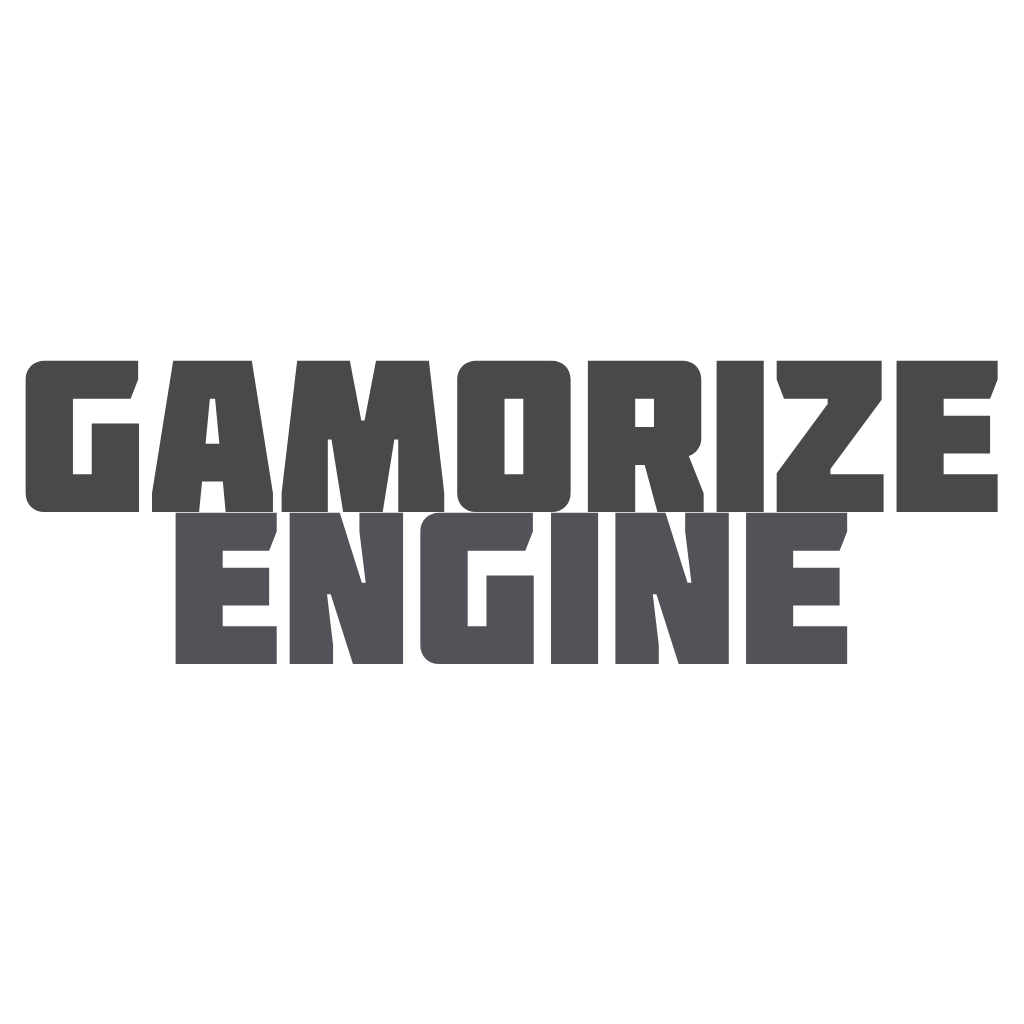
<style>
.page{position:relative;width:1024px;height:1024px;background:#ffffff}
.page>*{position:absolute;margin:0}
.t1{font:216px "Molot";color:#494949}
.t2{font:216px "Molot";color:#535258}
</style>
<div class="page">
<p class="t1" style="left:25px;top:360px;width:973px;height:152px">Gamorize</p>
<p class="t2" style="left:175px;top:512px;width:673px;height:152px">ENGINE</p>
</div>
